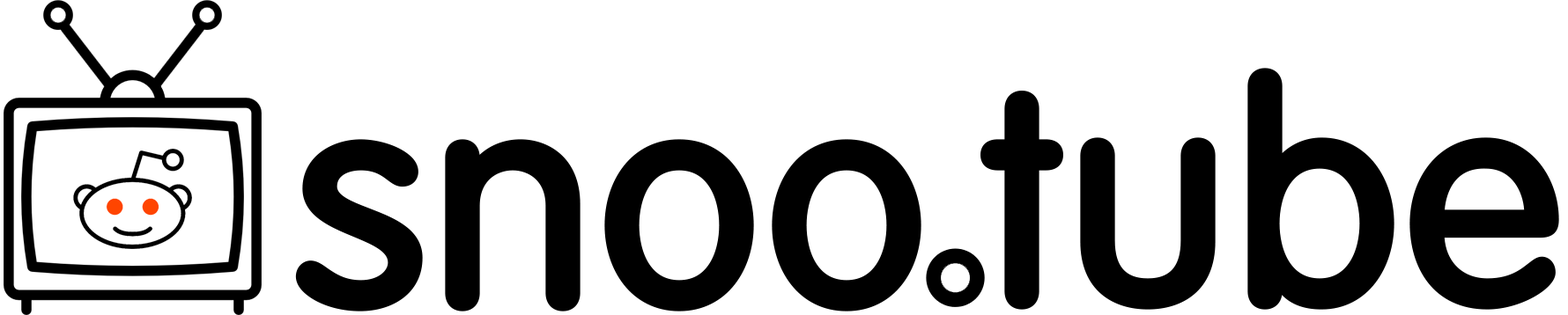
<style>
.page{position:relative;width:1568px;height:315px;background:#ffffff}
.page>*{position:absolute;margin:0}
.t1{font:301px "VAGRoundedStd-Light";letter-spacing:-0.01em;color:#000000;font-weight:bold}
</style>
<div class="page">
<p class="t1" style="left:980px;top:68px;width:579px;height:242px">tube</p>
<p class="t1" style="left:295px;top:139px;width:626px;height:173px">snoo</p>
</div>
